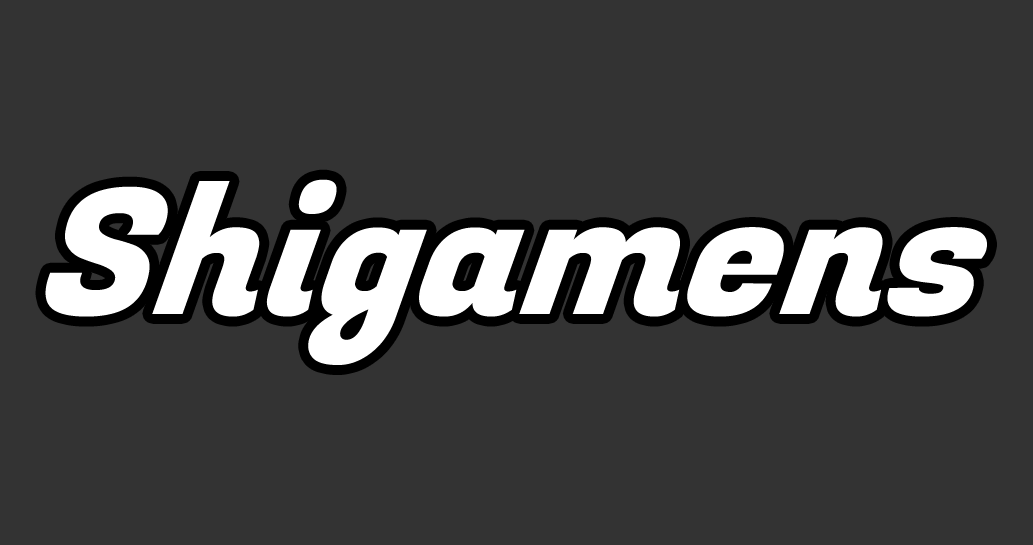
<style>
.page{position:relative;width:1033px;height:545px;background:#333333}
.page>*{position:absolute;margin:0}
.t1{font:175.3px "FugazOne-Regular";color:#ffffff;font-style:italic}
</style>
<div class="page">
<p class="t1" style="left:45px;top:179px;width:942px;height:186px">Shigamens</p>
</div>
